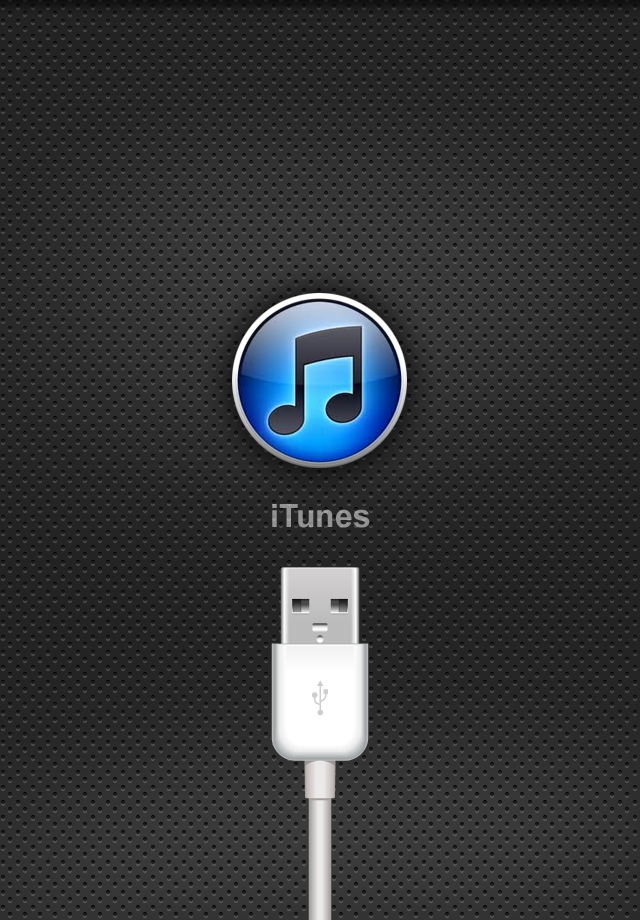
<style>
.page{position:relative;width:640px;height:920px}
.page>*{position:absolute;margin:0}
.t1{font:32px "Arial-BoldMT";color:#939393}
</style>
<div class="page">
<p class="t1" style="left:272px;top:504px;width:98px;height:24px">iTunes</p>
</div>
